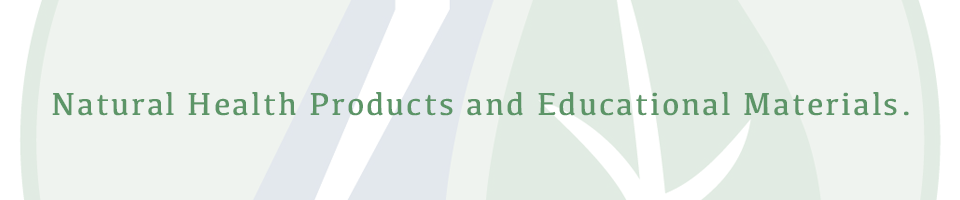
<style>
.page{position:relative;width:960px;height:200px;background:#eff3ef}
.page>*{position:absolute;margin:0}
.t1{font:33px "Kefa-Regular";letter-spacing:0.06em;color:#5c9567}
</style>
<div class="page">
<p class="t1" style="left:52px;top:92px;width:857px;height:24px">Natural Health Products and Educational Materials.</p>
</div>
